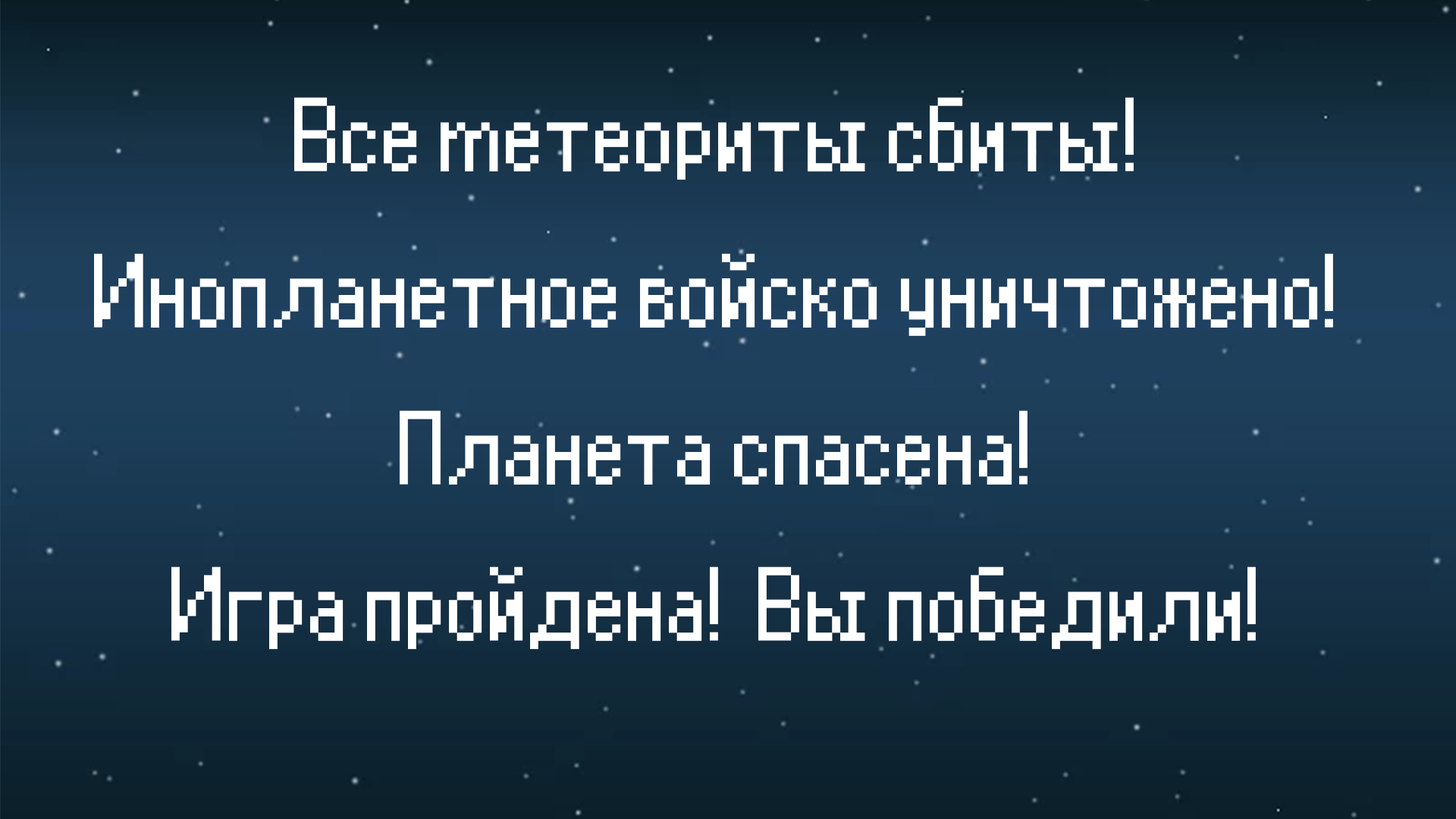
<style>
.page{position:relative;width:1456px;height:819px}
.page>*{position:absolute;margin:0}
.t1{font:130.4px "Glasstown-NBP";color:#ffffff}
</style>
<div class="page">
<p class="t1" style="left:94px;top:97px;width:1239px;height:552px;text-align:center">Все метеориты сбиты!<br>Инопланетное войско уничтожено!<br>Планета спасена!<br>Игра пройдена!  Вы победили!</p>
</div>
